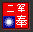
<style>
.page{position:relative;width:33px;height:32px;background:#f20000}
.page>*{position:absolute;margin:0}
.t1{font:10.4px "SimSun";color:#ffffff}
.t2{font:11.7px "SimSun";color:#ffffff}
</style>
<div class="page">
<p class="t1" style="left:7px;top:4px;width:18px;height:8px">二军</p>
<p class="t2" style="left:16px;top:15px;width:11px;height:12px">奉</p>
</div>
